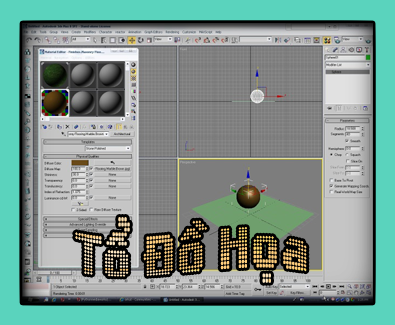
<style>
.page{position:relative;width:395px;height:325px;background:#5ad3bd}
.page>*{position:absolute;margin:0}
.t1{font:60px "HP-Yard-Regular";color:#ffce7d;scale:0.8 1}
</style>
<div class="page">
<p class="t1" style="left:75px;top:217px;width:232px;height:66px">Toå Ñoà Hoïa</p>
</div>
